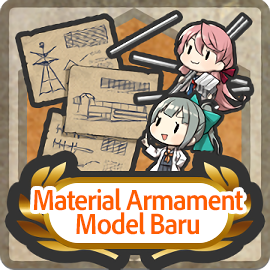
<style>
.page{position:relative;width:270px;height:270px}
.page>*{position:absolute;margin:0}
.t1{font:30px/24px "AdobeClean-Bold";letter-spacing:-0.04em;color:#ff5d00;scale:0.9 1}
</style>
<div class="page">
<p class="t1" style="left:33px;top:188px;width:210px;height:47px;text-align:center">Material Armament<br>Model Baru</p>
</div>
